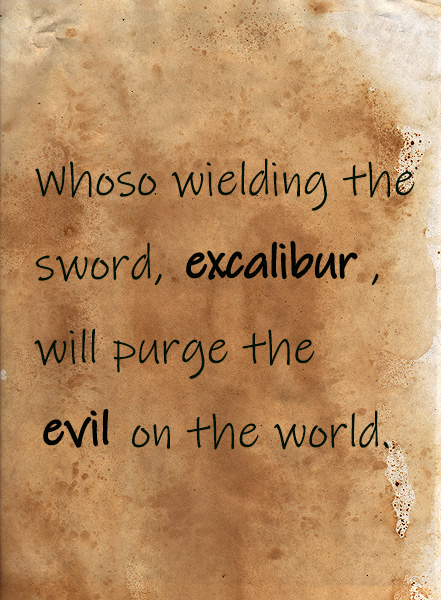
<style>
.page{position:relative;width:441px;height:600px}
.page>*{position:absolute;margin:0}
.t1{font:48px "InkFree";color:#011005}
</style>
<div class="page">
<p class="t1" style="left:34px;top:158px;width:381px;height:292px">Whoso wielding the<br>sword,               , <br>will purge the<br>       on the world.</p>
</div>
